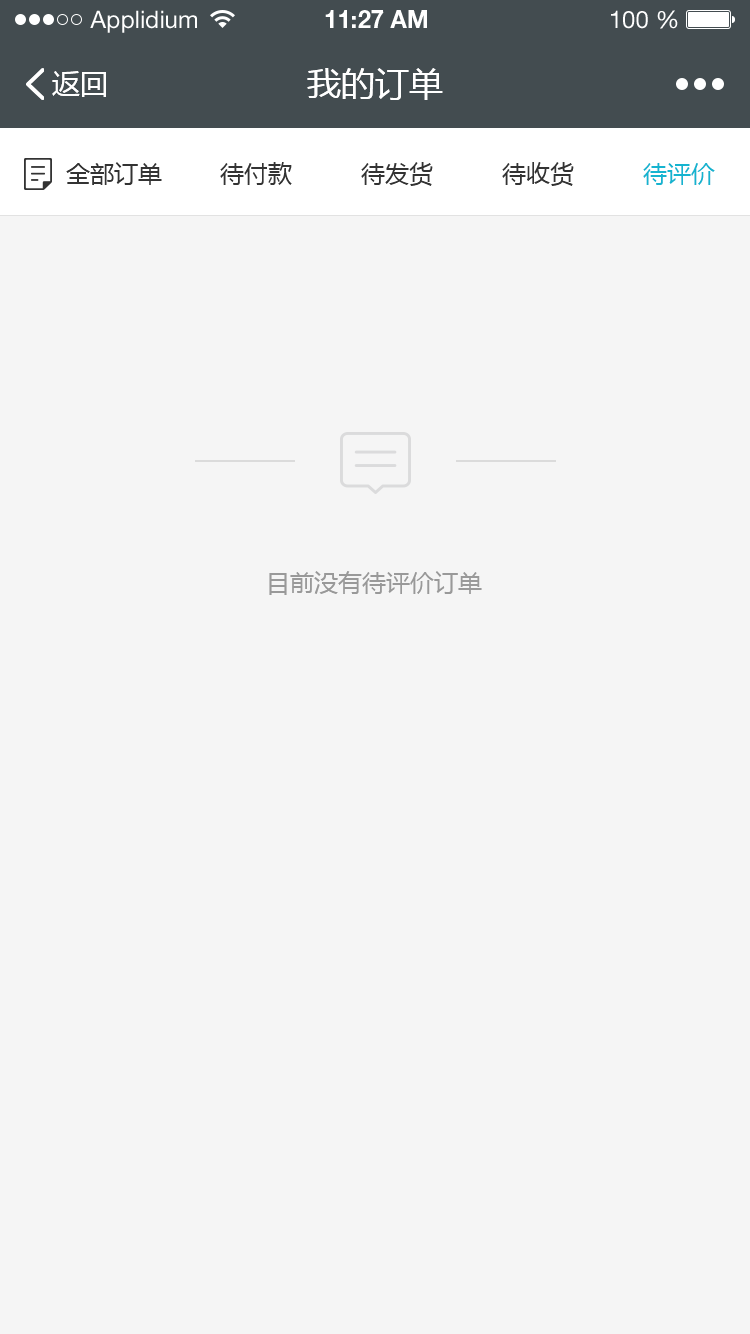
<style>
.page{position:relative;width:750px;height:1334px;background:#f5f5f5}
.page>*{position:absolute;margin:0}
.t1{font:24px "HelveticaNeueLTStd-Roman";color:#ffffff}
.t2{font:24px "HelveticaNeueLTStd-Bd";color:#ffffff}
.t3{font:28px "MicrosoftYaHei";color:#ffffff}
.t4{font:34px "MicrosoftYaHei";color:#ffffff}
.t5{font:24px "MicrosoftYaHei";color:#333333}
.t6{font:24px "MicrosoftYaHei";color:#15b4d0}
.t7{font:24px "MicrosoftYaHei";color:#999999}
</style>
<div class="page">
<p class="t1" style="left:90px;top:10px;width:107px;height:23px">Applidium</p>
<p class="t2" style="left:325px;top:10px;width:102px;height:18px">11:27 AM</p>
<p class="t1" style="left:611px;top:10px;width:67px;height:19px">100 %</p>
<p class="t3" style="left:52px;top:71px;width:54px;height:26px">返回</p>
<p class="t4" style="left:307px;top:68px;width:136px;height:32px">我的订单</p>
<p class="t5" style="left:66px;top:162px;width:96px;height:23px">全部订单</p>
<p class="t5" style="left:220px;top:162px;width:72px;height:23px">待付款</p>
<p class="t5" style="left:361px;top:162px;width:72px;height:24px">待发货</p>
<p class="t5" style="left:502px;top:162px;width:72px;height:24px">待收货</p>
<p class="t6" style="left:643px;top:163px;width:72px;height:22px">待评价</p>
<p class="t7" style="left:269px;top:571px;width:213px;height:24px">目前没有待评价订单</p>
</div>
